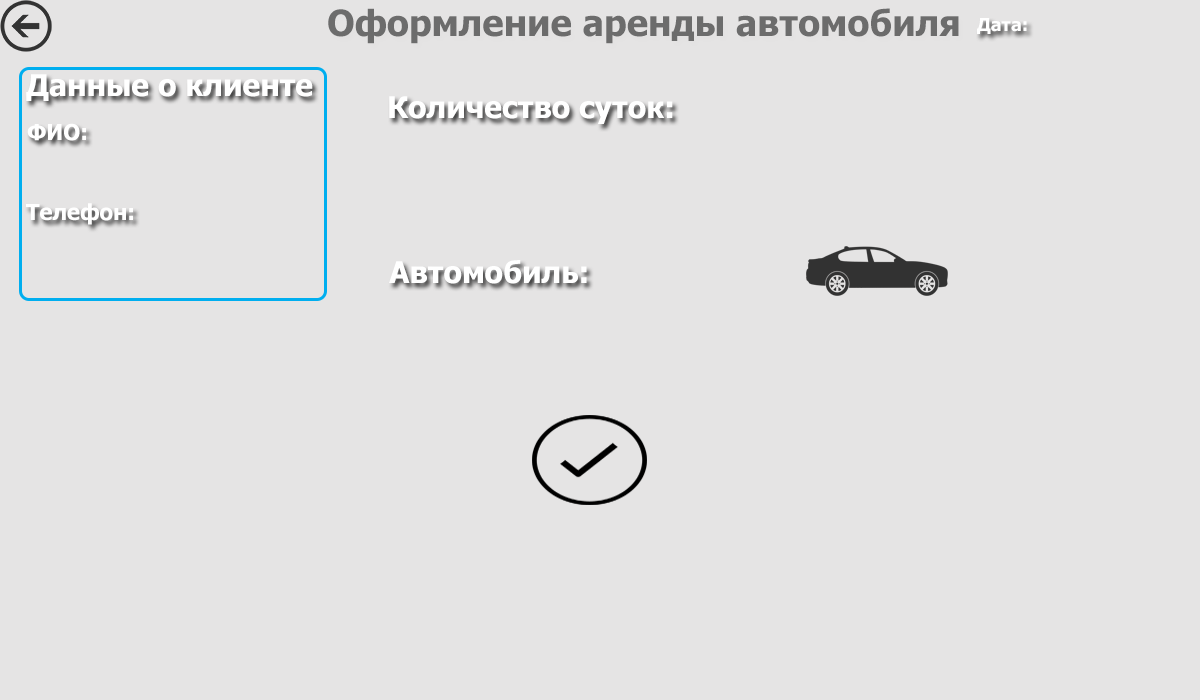
<style>
.page{position:relative;width:1200px;height:700px;background:#e5e4e4}
.page>*{position:absolute;margin:0}
.t1{font:36px "Tahoma-Bold";color:#6c6c6c}
.t2{font:18px "Tahoma-Bold";color:#ffffff}
.t3{font:30px "Tahoma-Bold";color:#ffffff}
.t4{font:22px "Tahoma-Bold";color:#ffffff}
</style>
<div class="page">
<p class="t1" style="left:328px;top:8px;width:631px;height:36px">Оформление аренды автомобиля</p>
<p class="t2" style="left:977px;top:18px;width:50px;height:16px">Дата:</p>
<p class="t3" style="left:26px;top:74px;width:287px;height:27px">Данные о клиенте</p>
<p class="t3" style="left:389px;top:96px;width:284px;height:28px">Количество суток:</p>
<p class="t4" style="left:27px;top:123px;width:59px;height:18px">ФИО:</p>
<p class="t4" style="left:26px;top:203px;width:107px;height:22px">Телефон:</p>
<p class="t3" style="left:389px;top:260px;width:198px;height:24px">Автомобиль:</p>
</div>
